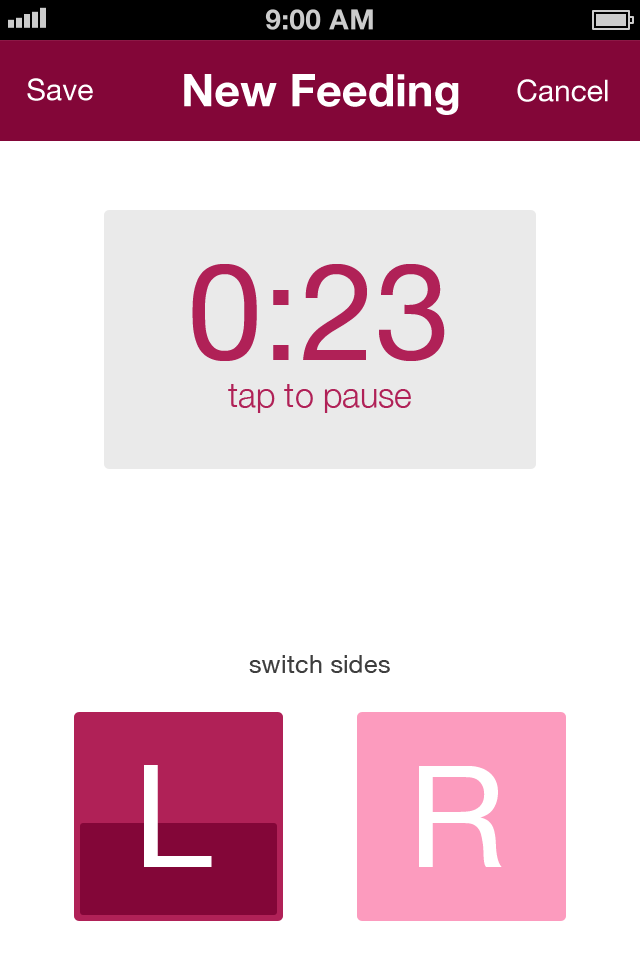
<style>
.page{position:relative;width:640px;height:960px;background:#ffffff}
.page>*{position:absolute;margin:0}
.t1{font:30px "HelveticaNeue";color:#ffffff}
.t2{font:45px "HelveticaNeue-Bold";color:#ffffff}
.t3{font:135.5px "HelveticaNeue";color:#b02157}
.t4{font:34px "HelveticaNeue-Light";color:#b02157}
.t5{font:25px "HelveticaNeue";color:#3e3e3e}
.t6{font:142.4px "HelveticaNeue";color:#ffffff}
</style>
<div class="page">
<p class="t1" style="left:27px;top:78px;width:66px;height:23px">Save</p>
<p class="t2" style="left:184px;top:74px;width:275px;height:41px">New Feeding</p>
<p class="t1" style="left:517px;top:79px;width:91px;height:23px">Cancel</p>
<p class="t3" style="left:192px;top:264px;width:253px;height:97px">0:23</p>
<p class="t4" style="left:228px;top:384px;width:183px;height:29px">tap to pause</p>
<p class="t5" style="left:249px;top:655px;width:141px;height:18px">switch sides</p>
<p class="t6" style="left:144px;top:765px;width:68px;height:102px">L</p>
<p class="t6" style="left:419px;top:766px;width:83px;height:101px">R</p>
</div>
